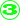
<style>
.page{position:relative;width:20px;height:20px;background:#ffffff}
.page>*{position:absolute;margin:0}
.t1{font:17px "LatinWide";color:#18fa14;scale:0.82 1}
</style>
<div class="page">
<p class="t1" style="left:2px;top:4px;width:16px;height:11px">3</p>
</div>
